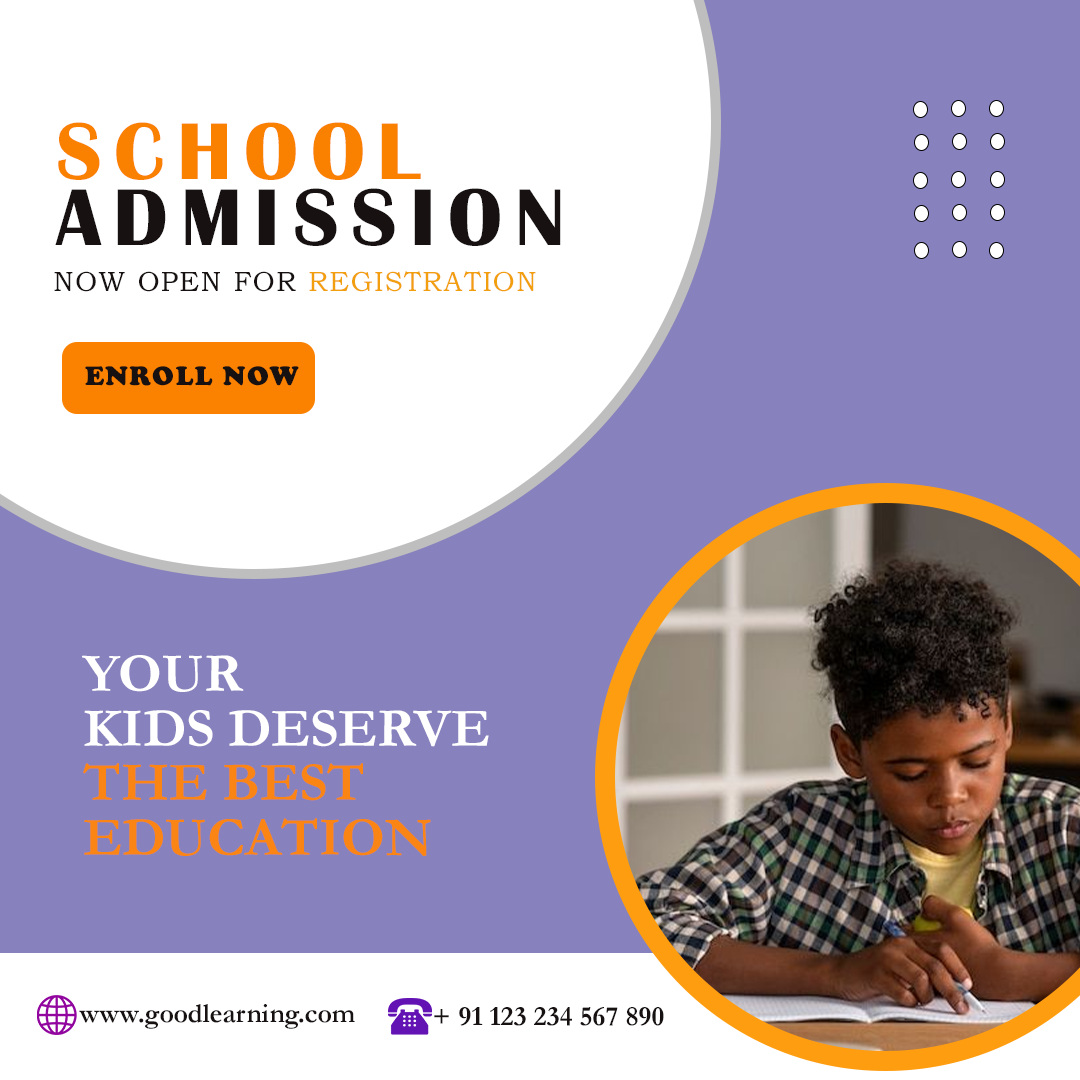
<style>
.page{position:relative;width:1080px;height:1080px;background:#8781bd}
.page>*{position:absolute;margin:0}
.t1{font:83.3px/66.7px "BritannicBold";letter-spacing:0.15em;color:#171111}
.t2{font:83.3px/66.7px "BritannicBold";letter-spacing:0.15em;color:#fa8100}
.t3{font:27.8px "BookmanOldStyle";letter-spacing:0.05em;color:#171111}
.t4{font:27.8px "BookmanOldStyle";letter-spacing:0.05em;color:#f29f0f}
.t5{font:27.8px "CooperBlack";letter-spacing:0.05em;color:#171111}
.t6{font:55.6px/54.4px "Garamond-Bold";color:#fa8514}
.t7{font:55.6px/54.4px "Garamond-Bold";color:#ffffff}
.t8{font:27.8px "Garamond-Bold";color:#171111}
</style>
<div class="page">
<p class="t1" style="left:55px;top:122px;width:506px;height:124px"><span class="t2">SCHOOL <br></span>ADMISSION</p>
<p class="t3" style="left:54px;top:271px;width:482px;height:21px">NOW OPEN FOR <span class="t4">REGISTRATION</span></p>
<p class="t5" style="left:85px;top:366px;width:214px;height:20px">ENROLL NOW</p>
<p class="t6" style="left:82px;top:655px;width:407px;height:201px"><span class="t7">YOUR<br>KIDS DESERVE<br></span>THE BEST <br>EDUCATION</p>
<p class="t8" style="left:79px;top:1004px;width:276px;height:25px">www.goodlearning.com</p>
<p class="t8" style="left:434px;top:1007px;width:230px;height:19px">+ 91 123 234 567 890</p>
</div>
